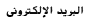
<style>
.page{position:relative;width:90px;height:23px;background:#ffffff}
.page>*{position:absolute;margin:0}
.t1{font:12px "BoutrosAdsMedium";color:#0c0b0b}
</style>
<div class="page">
<p class="t1" style="left:6px;top:6px;width:78px;height:12px">البريد الإلكترونى</p>
</div>
